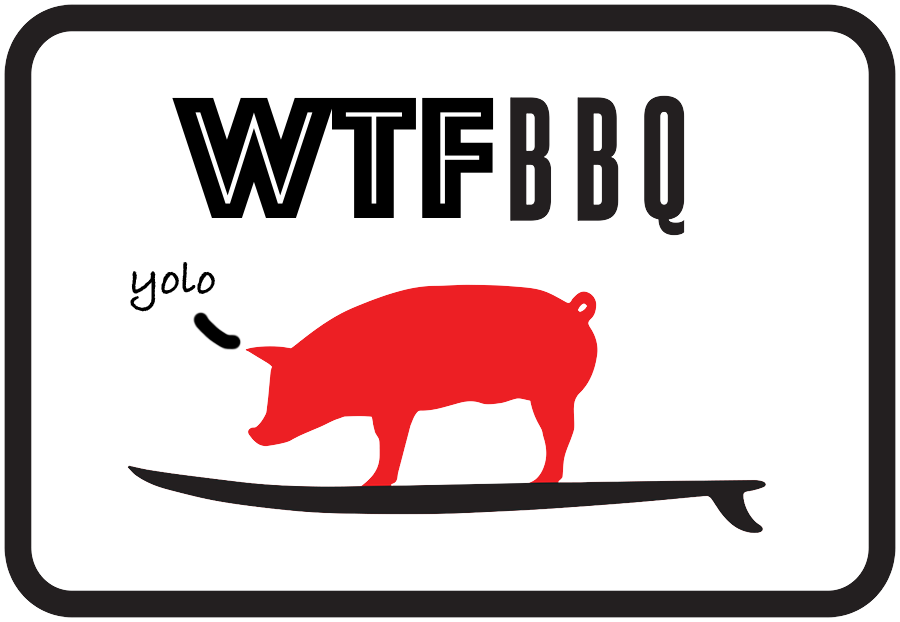
<style>
.page{position:relative;width:900px;height:622px;background:#ffffff}
.page>*{position:absolute;margin:0}
.t1{font:180px "Phosphate-Inline";color:#000000}
.t2{font:48px "BradleyHandITCTT-Bold";color:#000000}
</style>
<div class="page">
<p class="t1" style="left:172px;top:97px;width:322px;height:121px">wtf</p>
<p class="t2" style="left:130px;top:262px;width:85px;height:50px">yolo</p>
</div>
